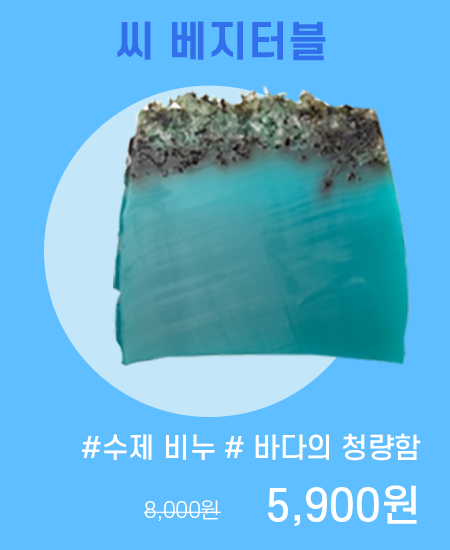
<style>
.page{position:relative;width:450px;height:550px;background:#5fbeff}
.page>*{position:absolute;margin:0}
.t1{font:41.7px "S-CoreDream-6Bold";color:#326fec}
.t2{font:27.8px "S-CoreDream-5Medium";color:#ffffff}
.t3{font:41.7px "S-CoreDream-5Medium";color:#ffffff}
.t4{font:20.8px "S-CoreDream-3Light";color:#ffffff}
</style>
<div class="page">
<p class="t1" style="left:117px;top:21px;width:209px;height:40px">씨 베지터블</p>
<p class="t2" style="left:82px;top:433px;width:339px;height:28px">#수제 비누 # 바다의 청량함</p>
<p class="t3" style="left:268px;top:485px;width:149px;height:41px">5,900원</p>
<p class="t4" style="left:143px;top:500px;width:78px;height:21px">8,000원</p>
</div>
